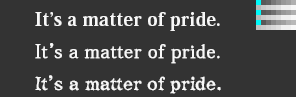
<style>
.page{position:relative;width:296px;height:97px;background:#333333}
.page>*{position:absolute;margin:0}
.t1{font:18px/32px "KozMinPro-Heavy";letter-spacing:0.022em;color:#f8f8f8}
.t2{font:18px/32px "AdobeFangsongStd-Regular";letter-spacing:0.028em;color:#f8f8f8;font-weight:bold}
.t3{font:18px/32px "AdobeFangsongStd-Regular";letter-spacing:-0.7em;color:#f8f8f8;font-weight:bold}
.t4{font:18px/32px "ComicMysteryStd-DB";letter-spacing:-0.006em;color:#f8f8f8}
</style>
<div class="page">
<p class="t1" style="left:35px;top:12px;width:186px;height:82px">It’s a matter of pride.<br><span class="t2">It</span><span class="t3">’</span><span class="t2">s a matter of pride.<br></span><span class="t4">It’s a matter of pride.</span></p>
</div>
